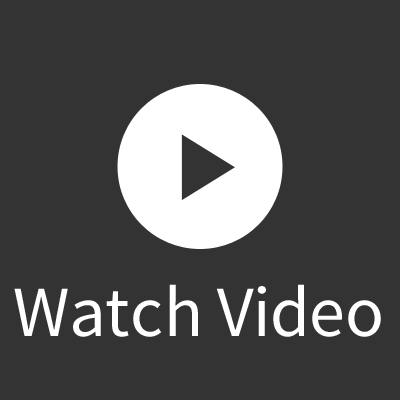
<style>
.page{position:relative;width:400px;height:400px;background:#333333}
.page>*{position:absolute;margin:0}
.t1{font:72px "SourceSansPro-Regular";color:#ffffff}
</style>
<div class="page">
<p class="t1" style="left:14px;top:284px;width:367px;height:53px">Watch Video</p>
</div>
